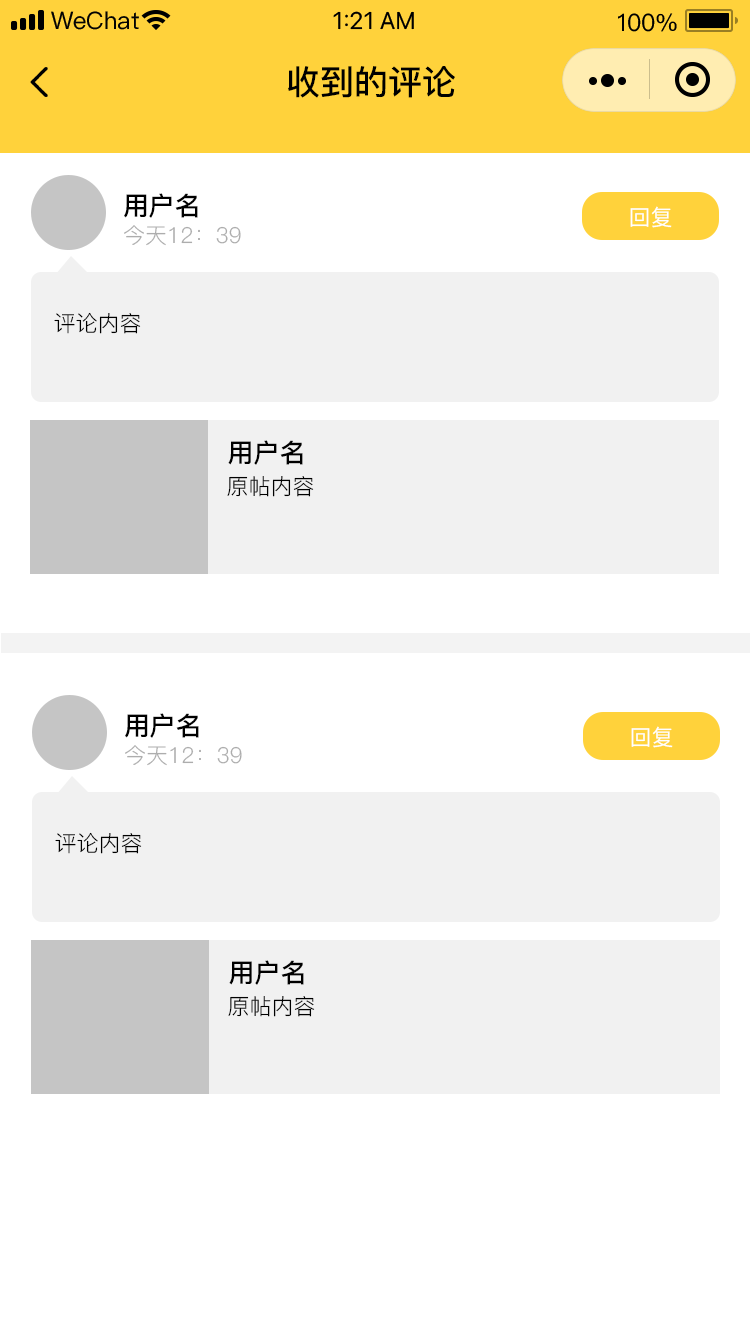
<style>
.page{position:relative;width:750px;height:1334px;background:#ffffff}
.page>*{position:absolute;margin:0}
.t1{font:34px "PingFang-SC-Bold";color:#000000}
.t2{font:26px "PingFang-SC-Bold";color:#000000}
.t3{font:22px "PingFang-SC-Medium";color:#ffffff}
.t4{font:22px "PingFang-SC-Regular";color:#adadad}
.t5{font:22px "PingFang-SC-Regular";color:#000000}
</style>
<div class="page">
<p class="t1" style="left:288px;top:66px;width:167px;height:32px">收到的评论</p>
<p class="t2" style="left:124px;top:193px;width:74px;height:25px">用户名</p>
<p class="t3" style="left:630px;top:206px;width:42px;height:22px">回复</p>
<p class="t4" style="left:124px;top:225px;width:117px;height:21px">今天12：39</p>
<p class="t5" style="left:54px;top:312px;width:87px;height:22px">评论内容</p>
<p class="t2" style="left:228px;top:440px;width:75px;height:25px">用户名</p>
<p class="t5" style="left:227px;top:476px;width:87px;height:21px">原帖内容</p>
<p class="t2" style="left:125px;top:713px;width:74px;height:25px">用户名</p>
<p class="t3" style="left:631px;top:726px;width:42px;height:22px">回复</p>
<p class="t4" style="left:125px;top:745px;width:117px;height:21px">今天12：39</p>
<p class="t5" style="left:55px;top:832px;width:87px;height:22px">评论内容</p>
<p class="t2" style="left:229px;top:960px;width:75px;height:25px">用户名</p>
<p class="t5" style="left:228px;top:996px;width:87px;height:21px">原帖内容</p>
</div>
